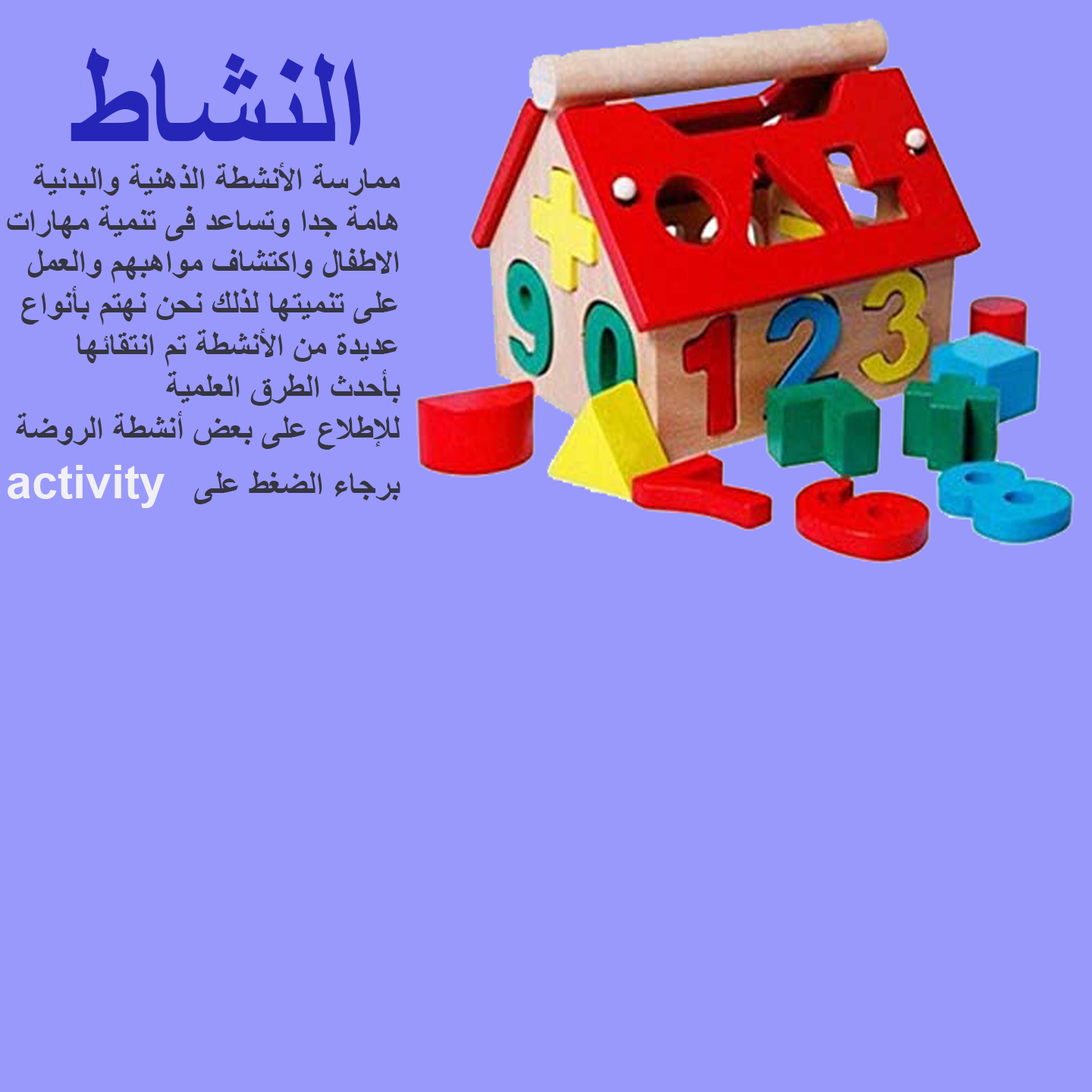
<style>
.page{position:relative;width:1092px;height:1092px;background:#9999fb}
.page>*{position:absolute;margin:0}
.t1{font:138.7px "Arial-BoldMT";color:#2525b8}
.t2{font:34.7px "Arial-BoldMT";color:#353541}
.t3{font:46.2px "Arial-BoldMT";color:#f0f0f5}
</style>
<div class="page">
<p class="t1" style="left:71px;top:47px;width:290px;height:99px">النشاط</p>
<p class="t2" style="left:7px;top:162px;width:393px;height:346px">ممارسة الأنشطة الذهنية والبدنية هامة جدا وتساعد فى تنمية مهارات الاطفال واكتشاف مواهبهم والعمل على تنميتها لذلك نحن نهتم بأنواع عديدة من الأنشطة تم انتقائها بأحدث الطرق العلمية                                   للإطلاع على بعض أنشطة الروضة برجاء الضغط على   <span class="t3">activity</span></p>
</div>
